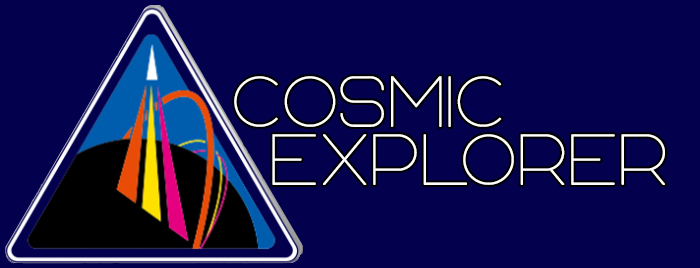
<style>
.page{position:relative;width:700px;height:268px;background:#03004d}
.page>*{position:absolute;margin:0}
.t1{font:72px "AgelastRegular";color:#ffffff}
</style>
<div class="page">
<p class="t1" style="left:234px;top:76px;width:268px;height:51px">Cosmic</p>
<p class="t1" style="left:272px;top:134px;width:393px;height:51px">Explorer</p>
</div>
